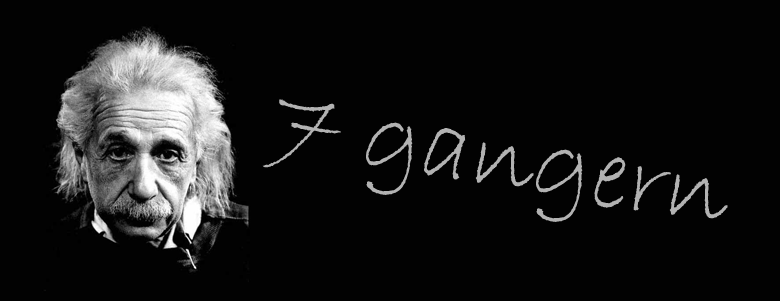
<style>
.page{position:relative;width:780px;height:301px;background:#020202}
.page>*{position:absolute;margin:0}
.t1{font:101.8px "BradleyHandITC";color:#b3b3b3}
</style>
<div class="page">
<p class="t1" style="left:262px;top:99px;width:466px;height:123px;rotate:9deg">7 gangern</p>
</div>
